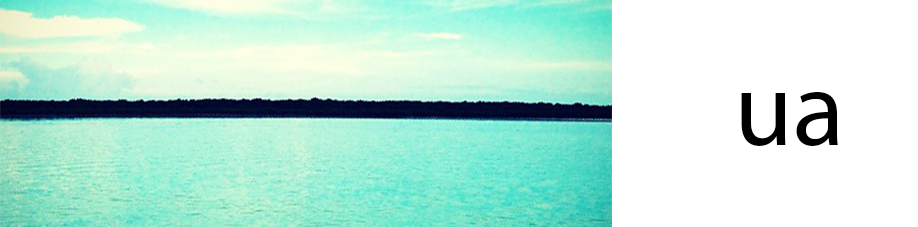
<style>
.page{position:relative;width:918px;height:227px;background:#ffffff}
.page>*{position:absolute;margin:0}
.t1{font:107.1px "MyriadPro-Regular";color:#000000}
</style>
<div class="page">
<p class="t1" style="left:741px;top:92px;width:97px;height:54px">ua</p>
</div>
